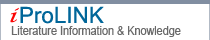
<style>
.page{position:relative;width:210px;height:40px;background:#ffffff}
.page>*{position:absolute;margin:0}
.t1{font:18px "LucidaCalligraphy-Italic";color:#fc0505;font-style:italic;scale:1.2 1}
.t2{font:12px "ArialMT";color:#696969;scale:0.9 1}
</style>
<div class="page">
<p class="t1" style="left:7px;top:6px;width:12px;height:22px">i</p>
<p class="t2" style="left:11px;top:25px;width:170px;height:14px">Literature Information &amp; Knowledge</p>
</div>
